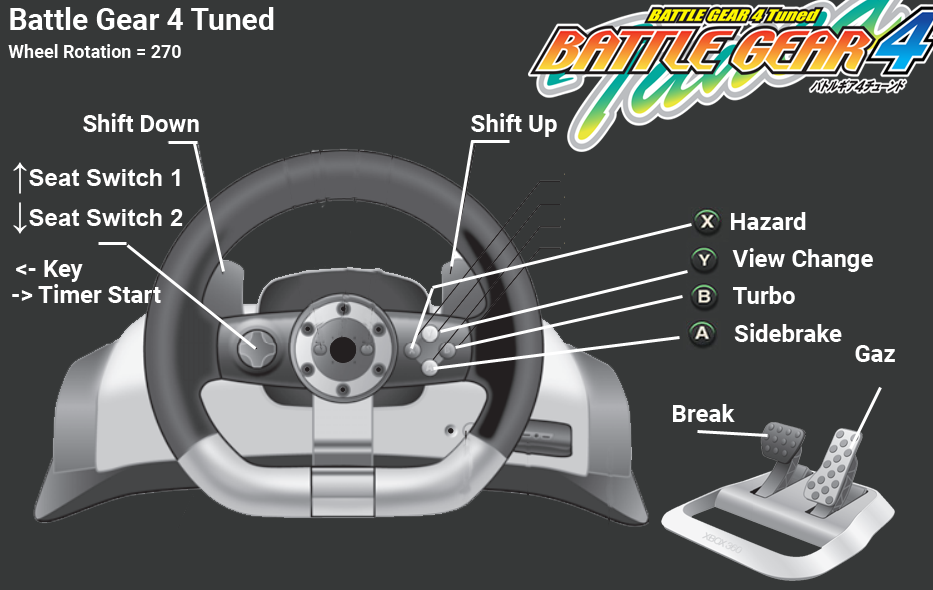
<style>
.page{position:relative;width:933px;height:590px;background:#363838}
.page>*{position:absolute;margin:0}
.t1{font:30px "Roboto-Bold";color:#ffffff}
.t2{font:18px "Roboto-Bold";color:#ffffff}
.t3{font:24px "Roboto-Bold";color:#ffffff}
.t4{font:24px "Arial-BoldMT";color:#ffffff}
.t5{font:36px "Arial-BoldMT";color:#ffffff}
</style>
<div class="page">
<p class="t1" style="left:10px;top:7px;width:264px;height:23px">Battle Gear 4 Tuned</p>
<p class="t2" style="left:8px;top:44px;width:173px;height:14px">Wheel Rotation = 270</p>
<p class="t3" style="left:83px;top:113px;width:116px;height:19px">Shift Down</p>
<p class="t3" style="left:471px;top:113px;width:86px;height:24px">Shift Up</p>
<p class="t4" style="left:13px;top:162px;width:167px;height:32px"><span class="t5">↑</span>Seat Switch 1</p>
<p class="t4" style="left:13px;top:202px;width:170px;height:32px"><span class="t5">↓</span>Seat Switch 2</p>
<p class="t3" style="left:731px;top:212px;width:75px;height:18px">Hazard</p>
<p class="t3" style="left:732px;top:248px;width:141px;height:24px">View Change</p>
<p class="t3" style="left:16px;top:260px;width:67px;height:22px">&lt;- Key</p>
<p class="t3" style="left:12px;top:284px;width:149px;height:19px">-&gt; Timer Start</p>
<p class="t3" style="left:733px;top:286px;width:62px;height:18px">Turbo</p>
<p class="t3" style="left:734px;top:323px;width:108px;height:19px">Sidebrake</p>
<p class="t3" style="left:855px;top:345px;width:40px;height:17px">Gaz</p>
<p class="t3" style="left:673px;top:404px;width:62px;height:18px">Break</p>
</div>
